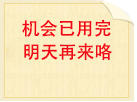
<style>
.page{position:relative;width:137px;height:102px}
.page>*{position:absolute;margin:0}
.t1{font:18px "AdobeHeitiStd-Regular";color:#f20919}
</style>
<div class="page">
<p class="t1" style="left:22px;top:19px;width:89px;height:18px">机会已用完</p>
<p class="t1" style="left:24px;top:43px;width:88px;height:17px">明天再来咯</p>
</div>
